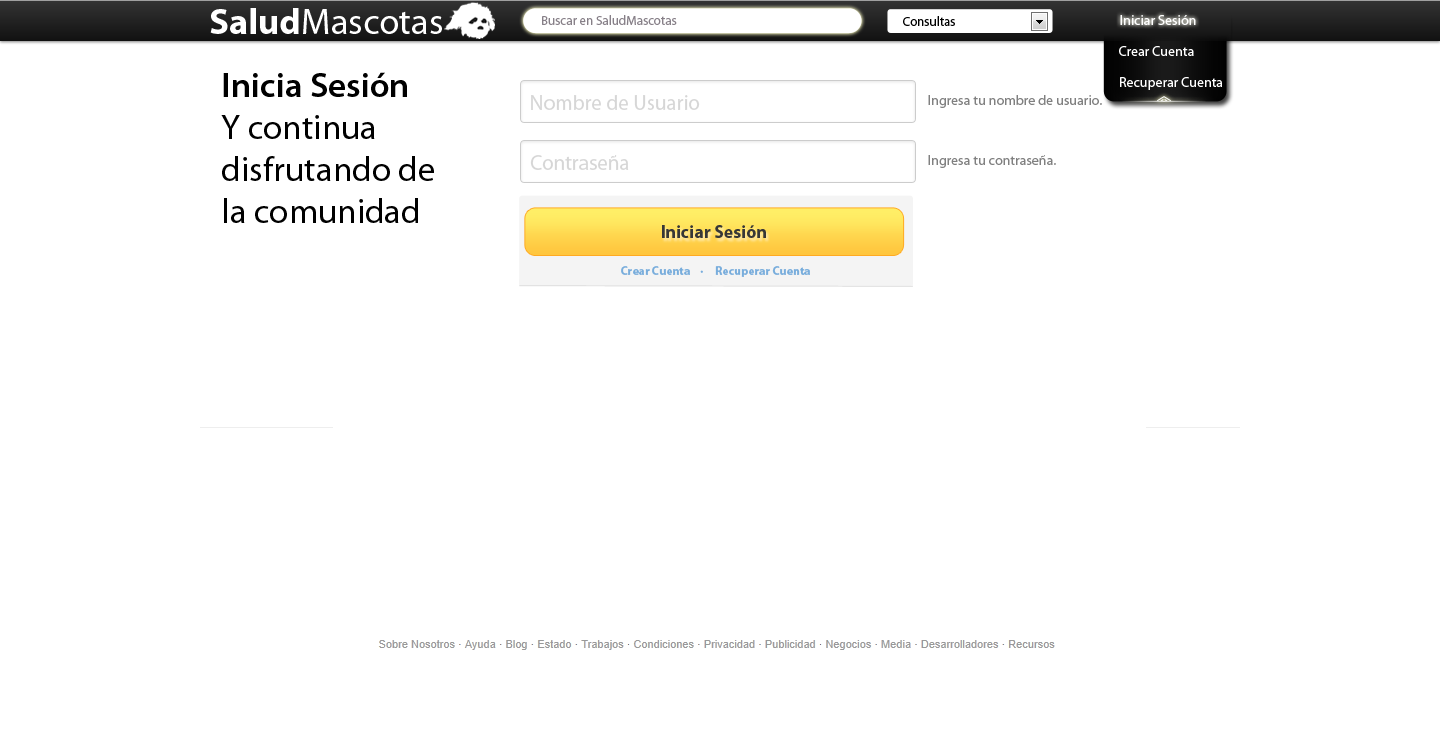
<style>
.page{position:relative;width:1440px;height:750px;background:#ffffff}
.page>*{position:absolute;margin:0}
.t1{font:36.6px "MyriadPro-Regular";color:#ffffff}
.t2{font:36.6px "MyriadPro-Bold";color:#ffffff}
.t3{font:13px "MyriadPro-Regular";color:#878088}
.t4{font:13px "MyriadPro-Regular";color:#000000}
.t5{font:14px "MyriadPro-Regular";color:#ffffff}
.t6{font:35px "MyriadPro-Regular";color:#000000}
.t7{font:35px "MyriadPro-Semibold";color:#000000}
.t8{font:21px "MyriadPro-Regular";color:#d6d6d6}
.t9{font:14px "MyriadPro-Regular";color:#808080}
.t10{font:18px "MyriadPro-Bold";color:#373737}
.t11{font:12px "MyriadPro-Bold";color:#78addc}
</style>
<div class="page">
<p class="t1" style="left:210px;top:8px;width:232px;height:26px"><span class="t2">Salud</span>Mascotas</p>
<p class="t3" style="left:542px;top:15px;width:135px;height:10px">Buscar en SaludMascotas</p>
<p class="t4" style="left:903px;top:16px;width:52px;height:10px">Consultas</p>
<p class="t5" style="left:1120px;top:15px;width:76px;height:10px">Iniciar Sesión</p>
<p class="t5" style="left:1120px;top:15px;width:76px;height:10px">Iniciar Sesión</p>
<p class="t5" style="left:1119px;top:46px;width:75px;height:10px">Crear Cuenta</p>
<p class="t6" style="left:221px;top:72px;width:213px;height:151px"><span class="t7">Inicia Sesión<br></span>Y continua <br>disfrutando de <br>la comunidad</p>
<p class="t5" style="left:1120px;top:77px;width:102px;height:13px">Recuperar Cuenta</p>
<p class="t8" style="left:531px;top:95px;width:169px;height:15px">Nombre de Usuario</p>
<p class="t9" style="left:928px;top:95px;width:174px;height:13px">Ingresa tu nombre de usuario.</p>
<p class="t8" style="left:530px;top:155px;width:99px;height:15px">Contraseña</p>
<p class="t9" style="left:928px;top:155px;width:128px;height:13px">Ingresa tu contraseña.</p>
<p class="t10" style="left:662px;top:225px;width:104px;height:13px">Iniciar Sesión</p>
<p class="t11" style="left:621px;top:266px;width:189px;height:11px">Crear Cuenta    ·     Recuperar Cuenta</p>
</div>
